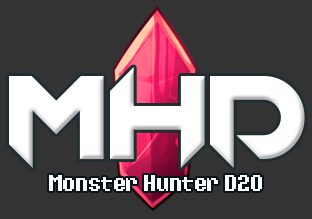
<style>
.page{position:relative;width:312px;height:219px;background:#333333}
.page>*{position:absolute;margin:0}
.t1{font:18px "Eight-Bit-Dragon";color:#fefefe}
</style>
<div class="page">
<p class="t1" style="left:49px;top:175px;width:213px;height:16px">Monster Hunter D20</p>
</div>
